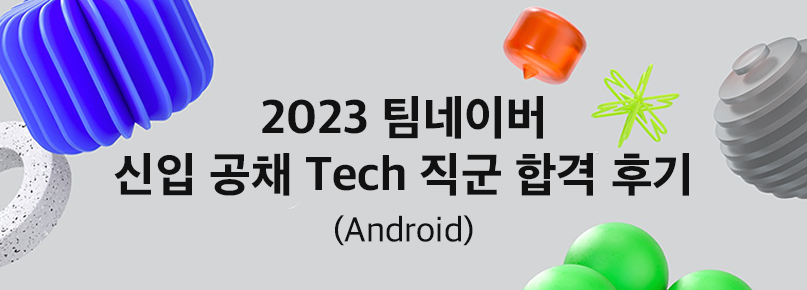
<style>
.page{position:relative;width:807px;height:290px;background:#d4d5d7}
.page>*{position:absolute;margin:0}
.t1{font:48px "AppleSDGothicNeoEB00";color:#111111}
.t2{font:36px "AppleSDGothicNeoM00";color:#111111}
</style>
<div class="page">
<p class="t1" style="left:114px;top:96px;width:575px;height:100px;text-align:center">2023 팀네이버<br>신입 공채 Tech 직군 합격 후기</p>
<p class="t2" style="left:335px;top:215px;width:138px;height:31px">(Android)</p>
</div>
